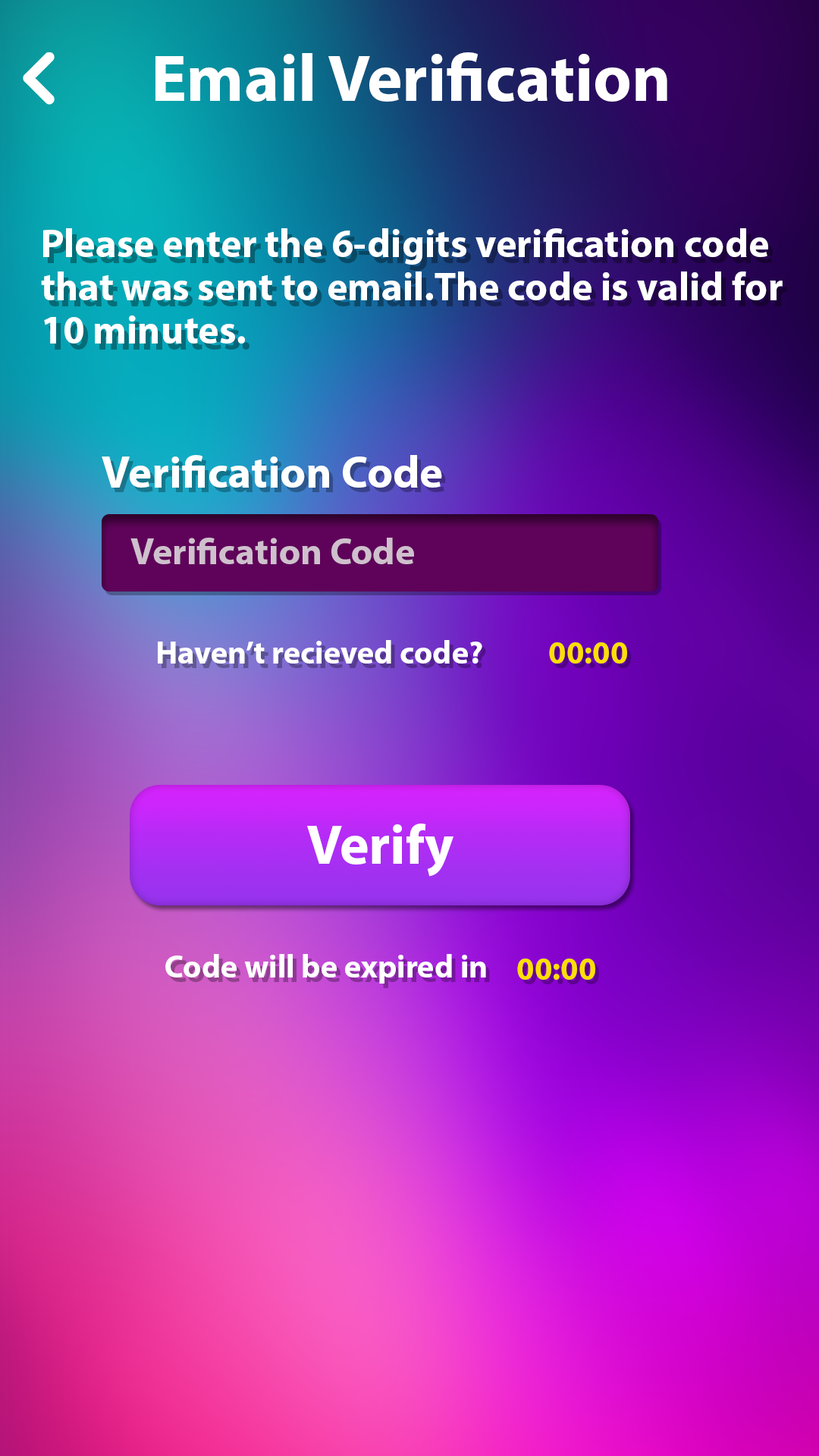
<style>
.page{position:relative;width:819px;height:1456px}
.page>*{position:absolute;margin:0}
.t1{font:66.8px "MyriadPro-Bold";color:#ffffff}
.t2{font:39.7px/43.1px "MyriadPro-Bold";color:#ffffff}
.t3{font:44.8px "MyriadPro-Bold";color:#ffffff}
.t4{font:37.3px "MyriadPro-Bold";color:#cfc0cd}
.t5{font:32.1px "MyriadPro-Bold";color:#ffffff}
.t6{font:32.1px "MyriadPro-Bold";color:#ffde01}
.t7{font:55.9px "MyriadPro-Bold";color:#ffffff}
</style>
<div class="page">
<p class="t1" style="left:155px;top:52px;width:512px;height:50px">Email Verification</p>
<p class="t2" style="left:41px;top:228px;width:742px;height:116px">Please enter the 6-digits verification code<br>that was sent to email.The code is valid for<br>10 minutes.</p>
<p class="t3" style="left:102px;top:455px;width:340px;height:33px">Verification Code</p>
<p class="t4" style="left:130px;top:538px;width:284px;height:26px">Verification Code</p>
<p class="t5" style="left:158px;top:640px;width:324px;height:24px">Haven’t recieved code?</p>
<p class="t6" style="left:549px;top:642px;width:78px;height:22px">00:00</p>
<p class="t7" style="left:307px;top:824px;width:146px;height:53px">Verify</p>
<p class="t5" style="left:165px;top:954px;width:321px;height:30px">Code will be expired in</p>
<p class="t6" style="left:517px;top:959px;width:78px;height:21px">00:00</p>
</div>
